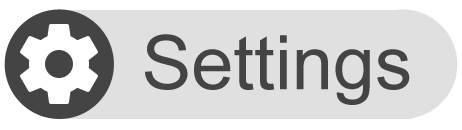
<style>
.page{position:relative;width:462px;height:130px;background:#e0e0e0}
.page>*{position:absolute;margin:0}
.t1{font:75.2px "ArialMT";color:#444444}
</style>
<div class="page">
<p class="t1" style="left:145px;top:34px;width:265px;height:71px">Settings</p>
</div>
